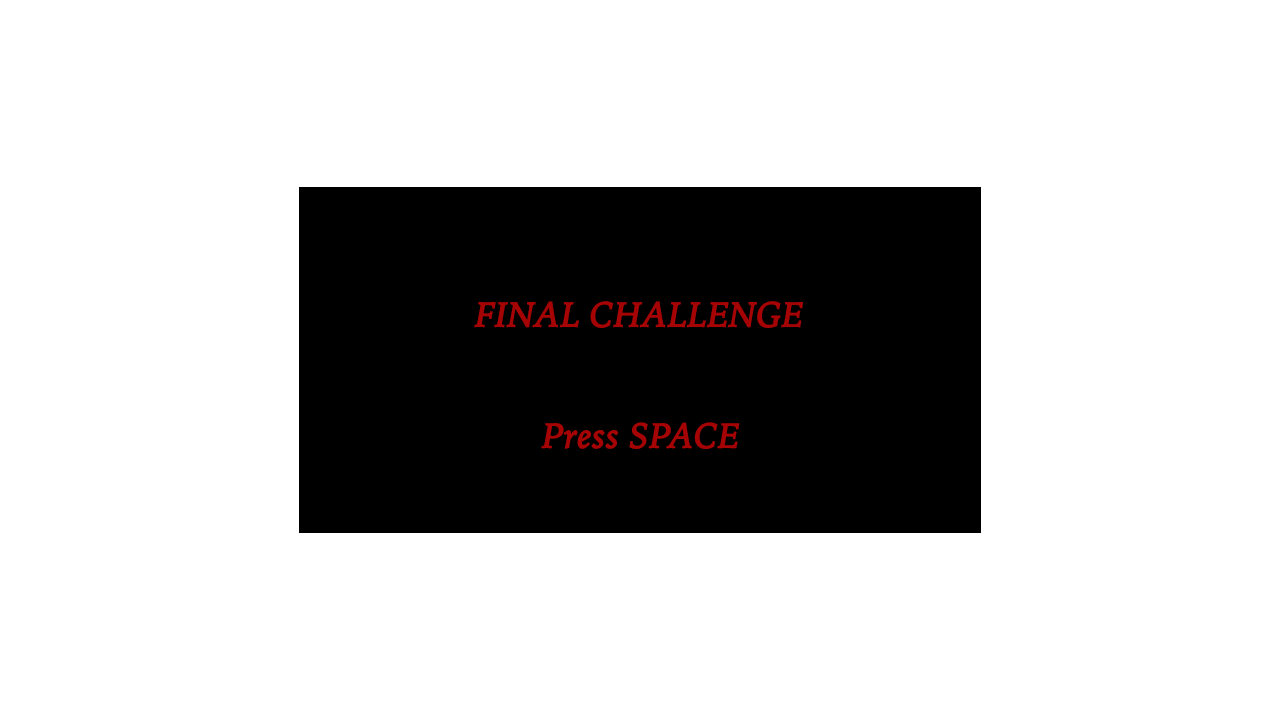
<style>
.page{position:relative;width:1280px;height:720px;background:#ffffff}
.page>*{position:absolute;margin:0}
.t1{font:36px "IowanOldStyle-Italic";color:#a60404;font-weight:bold}
</style>
<div class="page">
<p class="t1" style="left:474px;top:301px;width:329px;height:27px">FINAL CHALLENGE</p>
<p class="t1" style="left:541px;top:422px;width:199px;height:27px">Press SPACE</p>
</div>
